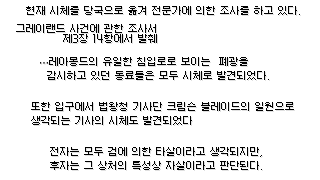
<style>
.page{position:relative;width:320px;height:180px;background:#ffffff}
.page>*{position:absolute;margin:0}
.t1{font:10px "Galmuri9-Regular";color:#000000}
.t2{font:10px/10px "Galmuri9-Regular";color:#000000}
.t3{font:10px/14px "Galmuri9-Regular";color:#000000}
.t4{font:10px/14px "DejaVuSans";color:#000000}
</style>
<div class="page">
<p class="t1" style="left:25px;top:6px;width:276px;height:10px">현재 시체를 당국으로 옮겨 전문가에 의한 조사를 하고 있다.</p>
<p class="t2" style="left:15px;top:24px;width:142px;height:19px;text-align:right">그레이랜드 사건에 관한 조사서<br>제3장 14항에서 발췌</p>
<p class="t3" style="left:40px;top:57px;width:229px;height:23px"><span class="t4">⋯</span>레아몽드의 유일한 침입로로 보이는  폐광을 <br>  감시하고 있던 동료들은 모두 시체로 발견되었다.</p>
<p class="t3" style="left:31px;top:102px;width:264px;height:23px">또한 입구에서 법왕청 기사단 크림슨 블레이드의 일원으로<br>생각되는 기사의 시체도 발견되었다</p>
<p class="t3" style="left:50px;top:147px;width:212px;height:23px">전자는 모두 검에 의한 타살이라고 생각되지만,<br>후자는 그 상처의 특성상 자살이라고 판단된다.</p>
</div>
